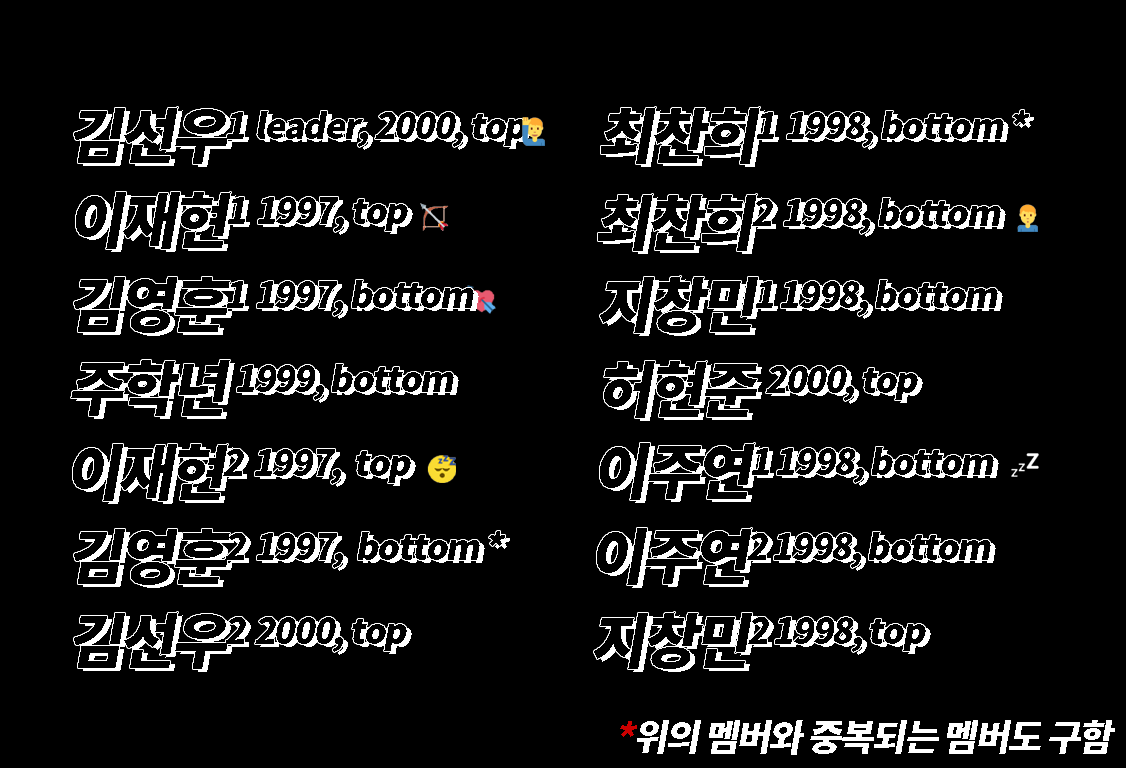
<style>
.page{position:relative;width:1126px;height:768px;background:#000000}
.page>*{position:absolute;margin:0}
.t1{font:60px "NotoSansCJKkr-Black";letter-spacing:-0.05em;color:#000000;font-style:italic}
.t2{font:37px "NotoSansCJKkr-Black";letter-spacing:-0.05em;color:#ffffff;font-style:italic}
.t3{font:37px "NotoSansCJKkr-Black";letter-spacing:-0.05em;color:#cc0000;font-style:italic}
</style>
<div class="page">
<p class="t1" style="left:601px;top:107px;width:428px;height:57px">최찬희1 1998, bottom *</p>
<p class="t1" style="left:76px;top:192px;width:332px;height:57px">이재현1 1997, top</p>
<p class="t1" style="left:598px;top:194px;width:403px;height:57px">최찬희2 1998, bottom</p>
<p class="t1" style="left:74px;top:277px;width:400px;height:56px">김영훈1 1997, bottom</p>
<p class="t1" style="left:600px;top:276px;width:398px;height:57px">지창민1 1998, bottom</p>
<p class="t1" style="left:71px;top:360px;width:383px;height:56px">주학년 1999, bottom</p>
<p class="t1" style="left:604px;top:361px;width:314px;height:57px">허현준  2000, top</p>
<p class="t1" style="left:73px;top:444px;width:338px;height:57px">이재현2 1997,  top</p>
<p class="t1" style="left:600px;top:443px;width:394px;height:57px">이주연1 1998, bottom</p>
<p class="t1" style="left:74px;top:529px;width:431px;height:56px">김영훈2 1997,  bottom *</p>
<p class="t1" style="left:597px;top:528px;width:394px;height:57px">이주연2 1998, bottom</p>
<p class="t1" style="left:74px;top:612px;width:333px;height:57px">김선우2 2000, top</p>
<p class="t1" style="left:594px;top:612px;width:332px;height:57px">지창민2 1998, top</p>
<p class="t2" style="left:620px;top:720px;width:495px;height:35px"><span class="t3">*</span>위의 멤버와 중복되는 멤버도 구함</p>
</div>
